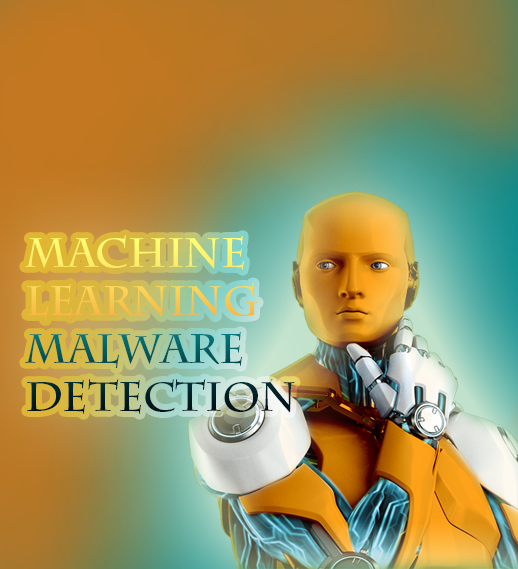
<style>
.page{position:relative;width:518px;height:569px}
.page>*{position:absolute;margin:0}
.t1{font:40px "CharlemagneStd-Bold"}
</style>
<div class="page">
<p class="t1" style="left:25px;top:235px;width:270px;height:179px">Machine<br>Learning<br>Malware<br>Detection</p>
</div>
